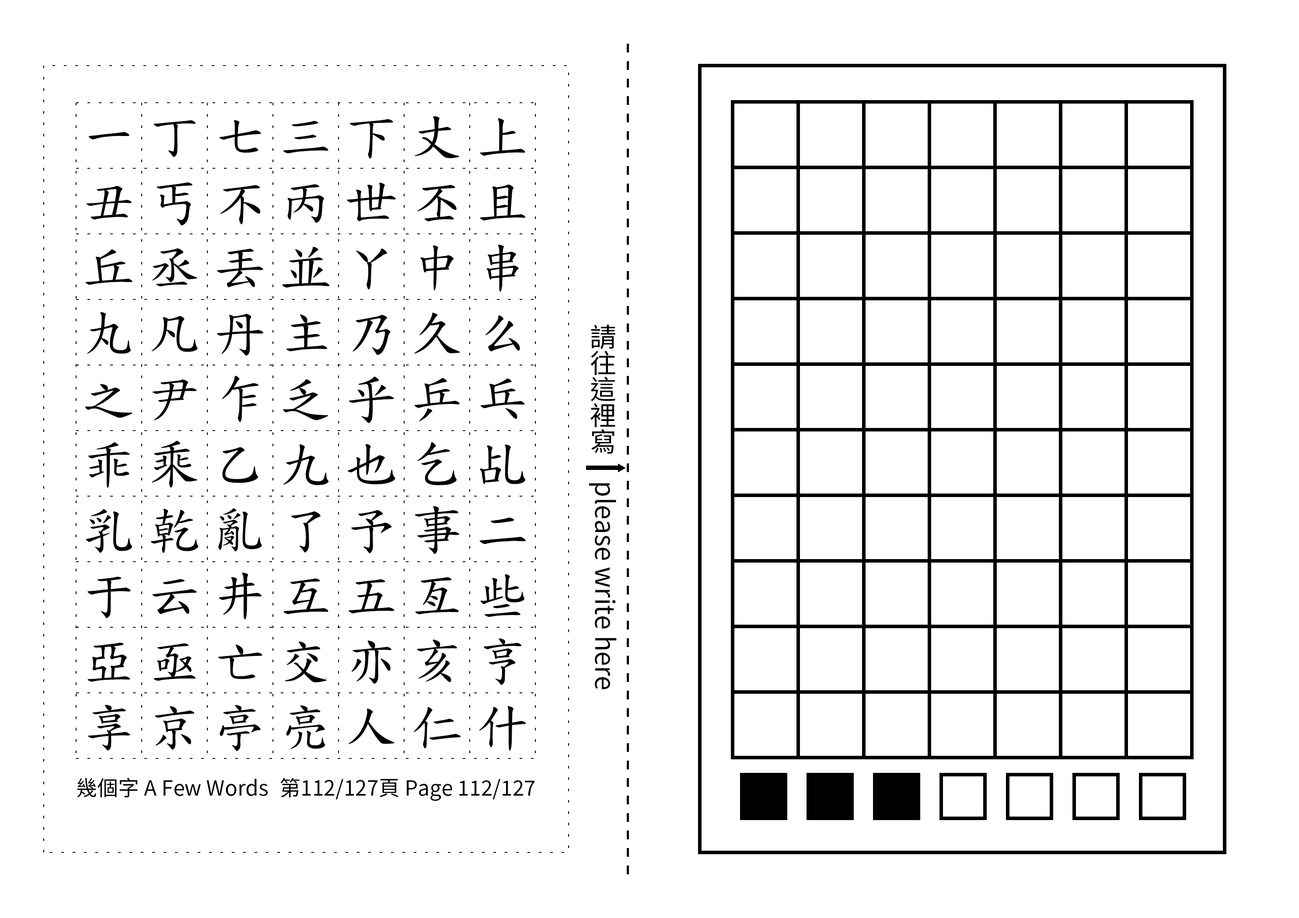
<style>
.page{position:relative;width:1299px;height:918px;background:#ffffff}
.page>*{position:absolute;margin:0}
.t1{font:52.5px/65.6px "TW-Kai-98_1";letter-spacing:0.25em;color:#000000}
.t2{font:26.2px "SourceHanSansTC-Regular";color:#000000}
.t3{font:21px "SourceHanSansTC-Regular";color:#000000}
</style>
<div class="page">
<p class="t1" style="left:85px;top:116px;width:441px;height:636px;text-align:center">一丁七三下丈上丑丐不丙世丕且丘丞丟並丫中串丸凡丹主乃久么之尹乍乏乎乒乓乖乘乙九也乞乩乳乾亂了予事二于云井互五亙些亞亟亡交亦亥亨享京亭亮人仁什</p>
<p class="t2" style="left:589px;top:324px;width:28px;height:366px;text-align:center">請往這裡寫　please write here</p>
<p class="t3" style="left:77px;top:778px;width:191px;height:20px">幾個字 A Few Words</p>
<p class="t3" style="left:280px;top:778px;width:255px;height:23px">第112/127頁 Page 112/127</p>
</div>
